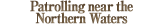
<style>
.page{position:relative;width:164px;height:26px;background:#ffffff}
.page>*{position:absolute;margin:0}
.t1{font:14px/12px "RyuminPro-ExBold";letter-spacing:-0.08em;color:#6e5a41;font-weight:bold;scale:0.9 1}
</style>
<div class="page">
<p class="t1" style="left:30px;top:0px;width:103px;height:24px;text-align:center">Patrolling near the<br>Northern Waters</p>
</div>
